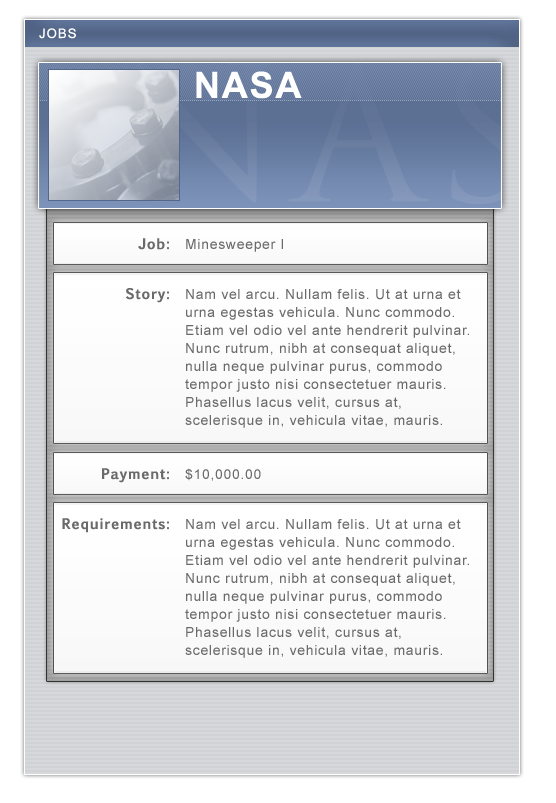
<style>
.page{position:relative;width:556px;height:803px}
.page>*{position:absolute;margin:0}
.t1{font:20px "Vrinda";letter-spacing:0.05em;color:#ffffff;text-transform:uppercase}
.t2{font:36px "Arial-BoldMT";letter-spacing:0.05em;color:#ffffff}
.t3{font:14px "EuphemiaUCAS-Bold";letter-spacing:0.05em;color:#6a6a6a}
.t4{font:14px "ArialMT";letter-spacing:0.05em;color:#6a6a6a}
.t5{font:14px/18px "ArialMT";letter-spacing:0.05em;color:#6a6a6a}
</style>
<div class="page">
<p class="t1" style="left:39px;top:28px;width:37px;height:11px">jobs</p>
<p class="t2" style="left:196px;top:71px;width:106px;height:28px">NASA</p>
<p class="t3" style="left:138px;top:238px;width:31px;height:12px">Job:</p>
<p class="t4" style="left:186px;top:239px;width:97px;height:13px">Minesweeper I</p>
<p class="t3" style="left:126px;top:288px;width:43px;height:15px">Story:</p>
<p class="t5" style="left:185px;top:289px;width:284px;height:139px">Nam vel arcu. Nullam felis. Ut at urna et <br>urna egestas vehicula. Nunc commodo. <br>Etiam vel odio vel ante hendrerit pulvinar.<br>Nunc rutrum, nibh at consequat aliquet, <br>nulla neque pulvinar purus, commodo <br>tempor justo nisi consectetuer mauris. <br>Phasellus lacus velit, cursus at, <br>scelerisque in, vehicula vitae, mauris.</p>
<p class="t3" style="left:102px;top:468px;width:67px;height:15px">Payment:</p>
<p class="t4" style="left:185px;top:468px;width:76px;height:13px">$10,000.00</p>
<p class="t3" style="left:62px;top:518px;width:107px;height:15px">Requirements:</p>
<p class="t5" style="left:185px;top:519px;width:284px;height:139px">Nam vel arcu. Nullam felis. Ut at urna et <br>urna egestas vehicula. Nunc commodo. <br>Etiam vel odio vel ante hendrerit pulvinar.<br>Nunc rutrum, nibh at consequat aliquet, <br>nulla neque pulvinar purus, commodo <br>tempor justo nisi consectetuer mauris. <br>Phasellus lacus velit, cursus at, <br>scelerisque in, vehicula vitae, mauris.</p>
</div>
